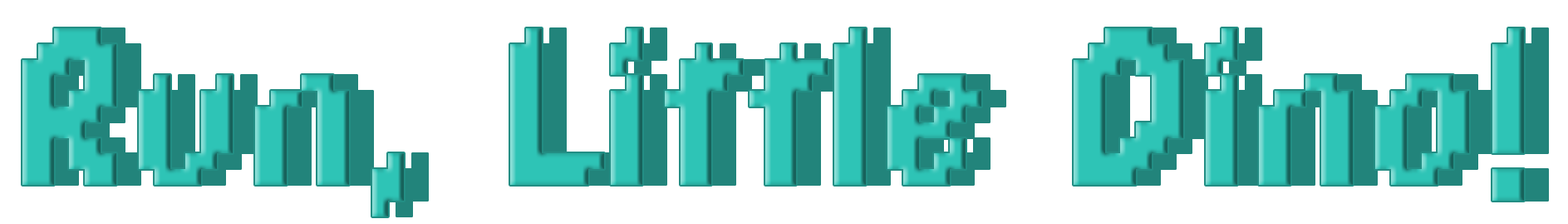
<style>
.page{position:relative;width:1568px;height:224px;background:#ffffff}
.page>*{position:absolute;margin:0}
.t1{font:242.4px "DPComicRegular";letter-spacing:0.025em;color:#2ec4b6}
</style>
<div class="page">
<p class="t1" style="left:22px;top:28px;width:1502px;height:188px">Run, Little Dino!</p>
</div>
